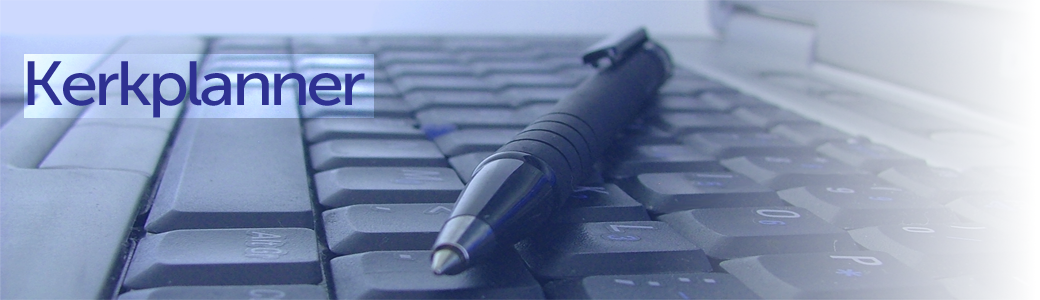
<style>
.page{position:relative;width:1040px;height:300px}
.page>*{position:absolute;margin:0}
.t1{font:61.9px "MuseoSans-500";letter-spacing:-0.06em;color:#2e3192;scale:1.11 1}
</style>
<div class="page">
<p class="t1" style="left:27px;top:61px;width:338px;height:57px">Kerkplanner</p>
</div>
